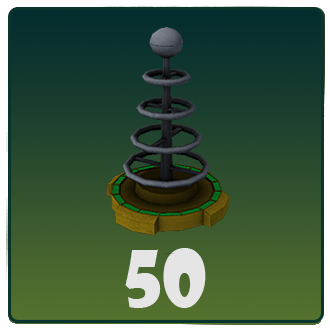
<style>
.page{position:relative;width:330px;height:330px}
.page>*{position:absolute;margin:0}
.t1{font:76.4px "ShowcardGothic-Reg";color:#e5e5e5}
</style>
<div class="page">
<p class="t1" style="left:125px;top:248px;width:81px;height:60px">50</p>
</div>
